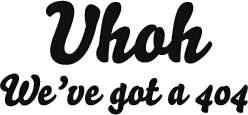
<style>
.page{position:relative;width:248px;height:115px;background:#ffffff}
.page>*{position:absolute;margin:0}
.t1{font:82px "Bello-Pro";color:#111111}
.t2{font:42px "Bello-Pro";color:#111111}
</style>
<div class="page">
<p class="t1" style="left:46px;top:0px;width:167px;height:65px">Uhoh</p>
<p class="t2" style="left:0px;top:73px;width:248px;height:42px">We’ve got a 404</p>
</div>
